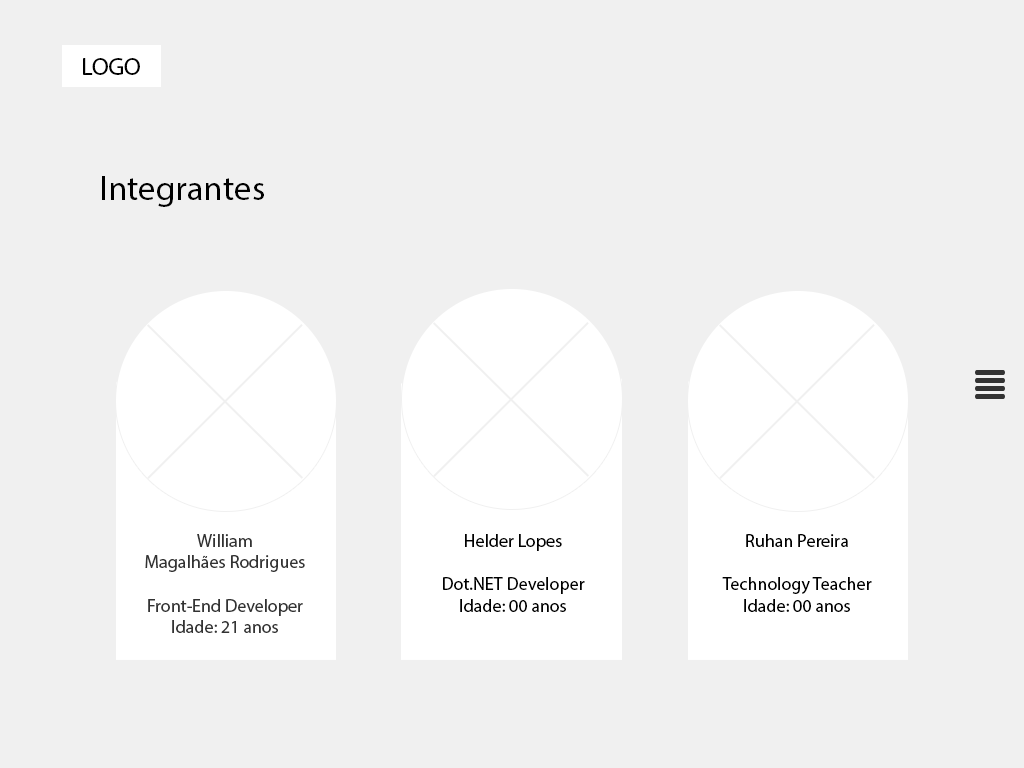
<style>
.page{position:relative;width:1024px;height:768px;background:#f0f0f0}
.page>*{position:absolute;margin:0}
.t1{font:12px "MyriadPro-Regular";color:#000000}
.t2{font:35px "MyriadPro-Regular";color:#000000}
.t3{font:18px "MyriadPro-Regular";color:#333333}
.t4{font:18px "MyriadPro-Regular";color:#000000}
</style>
<div class="page">
<p class="t1" style="left:83px;top:58px;width:57px;height:17px">LOGO</p>
<p class="t2" style="left:102px;top:176px;width:162px;height:31px">Integrantes</p>
<p class="t3" style="left:145px;top:534px;width:160px;height:99px;text-align:center">William<br>Magalhães Rodrigues<br><br>Front-End Developer<br>Idade: 21 anos</p>
<p class="t4" style="left:443px;top:534px;width:142px;height:78px;text-align:center">Helder Lopes<br><br>Dot.NET Developer<br>Idade: 00 anos</p>
<p class="t4" style="left:722px;top:534px;width:150px;height:78px;text-align:center">Ruhan Pereira<br><br>Technology Teacher<br>Idade: 00 anos</p>
</div>
